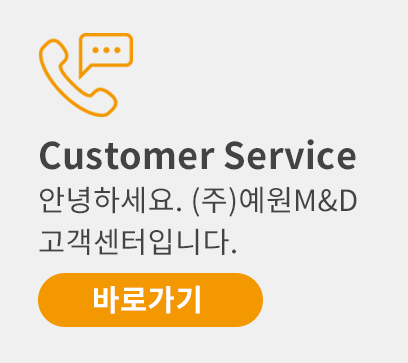
<style>
.page{position:relative;width:408px;height:363px;background:#f0f0f0}
.page>*{position:absolute;margin:0}
.t1{font:29.4px/42px "NotoSansCJKkr-Regular";letter-spacing:0.01em;color:#434343}
.t2{font:36.7px/37.2px "NotoSansCJKkr-Bold";letter-spacing:0.01em;color:#434343}
.t3{font:30px "NotoSansCJKkr-Bold";letter-spacing:0.01em;color:#ffffff}
</style>
<div class="page">
<p class="t1" style="left:39px;top:139px;width:318px;height:116px"><span class="t2">Customer Service <br></span>안녕하세요. (주)예원M&amp;D 고객센터입니다.</p>
<p class="t3" style="left:94px;top:285px;width:106px;height:29px">바로가기</p>
</div>
